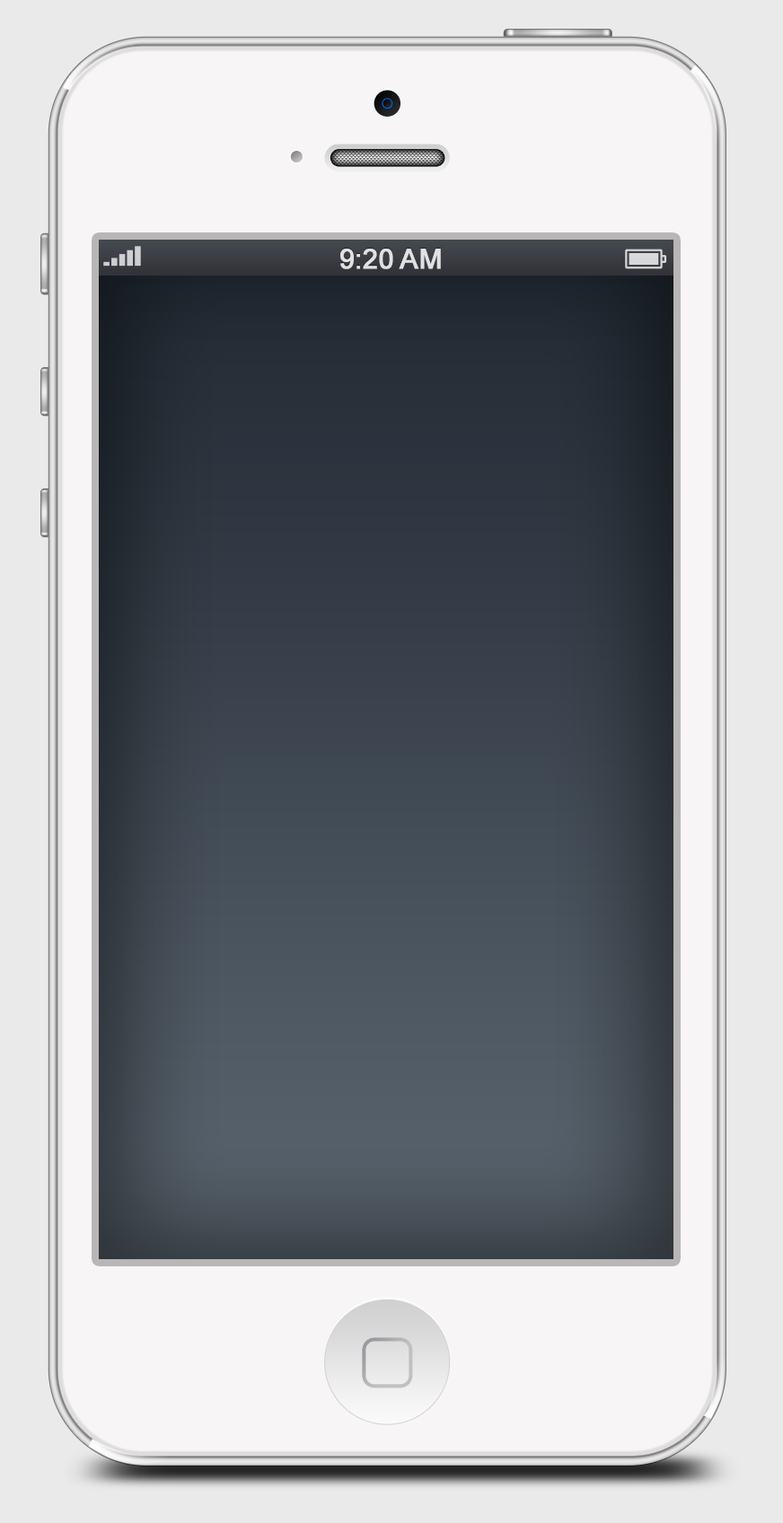
<style>
.page{position:relative;width:783px;height:1523px;background:#f7f5f5}
.page>*{position:absolute;margin:0}
.t1{font:27.4px "ArialMT";color:#e1e1e2;text-transform:uppercase;font-weight:bold}
</style>
<div class="page">
<p class="t1" style="left:340px;top:249px;width:101px;height:20px">9:20 AM</p>
</div>
